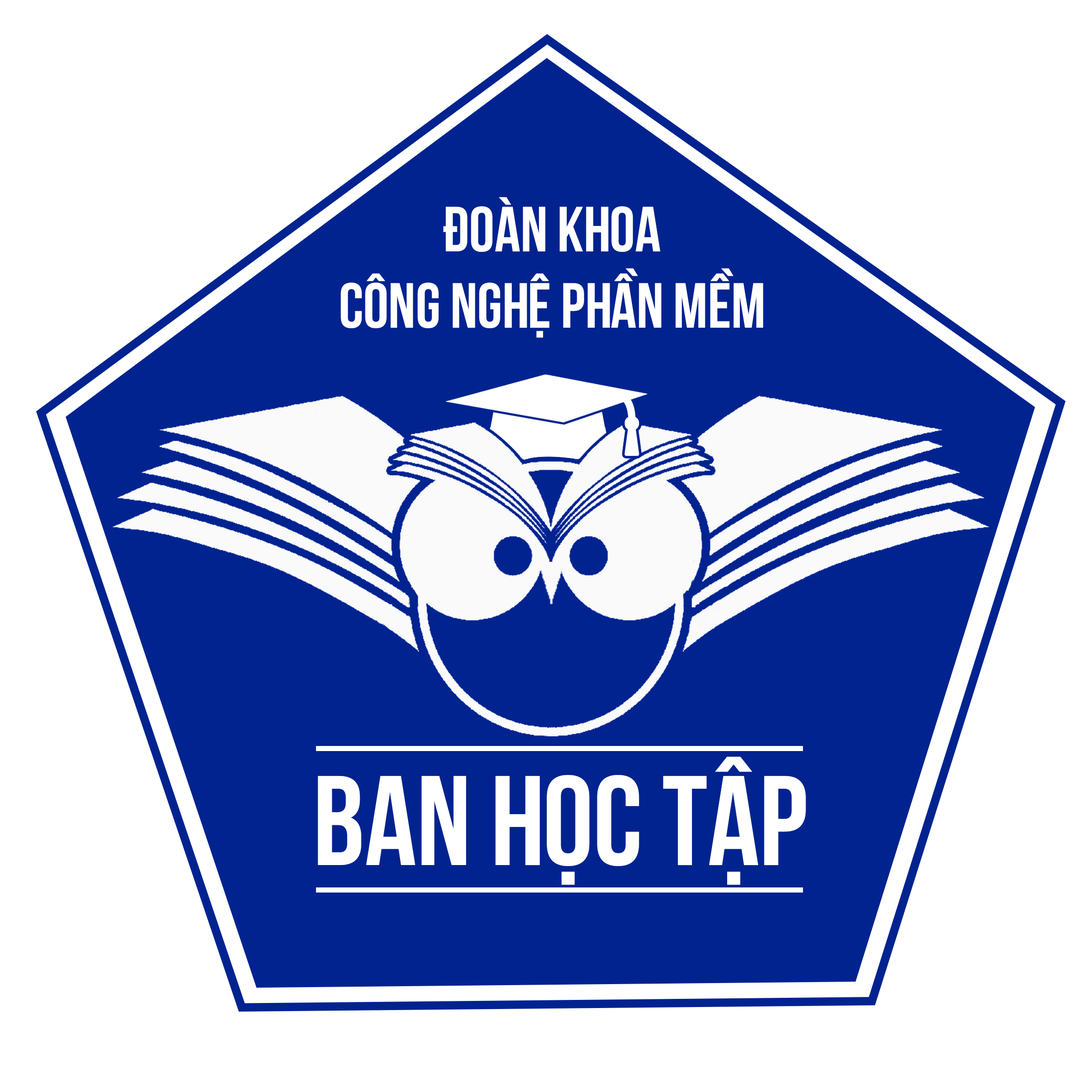
<style>
.page{position:relative;width:1092px;height:1092px;background:#ffffff}
.page>*{position:absolute;margin:0}
.t1{font:63.6px "UTM-Bebas";color:#ffffff}
.t2{font:127.2px "UTM-Bebas";color:#ffffff}
</style>
<div class="page">
<p class="t1" style="left:340px;top:197px;width:423px;height:141px;text-align:center">đoàn khoa<br>công nghệ phần mềm</p>
<p class="t2" style="left:318px;top:757px;width:488px;height:128px">ban học tập</p>
</div>
